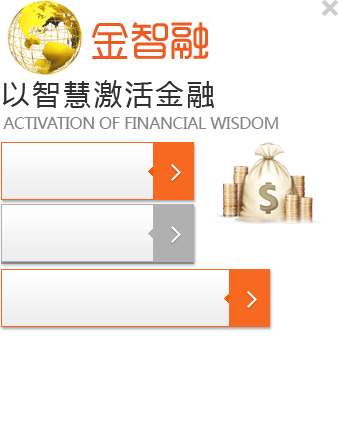
<style>
.page{position:relative;width:339px;height:448px;background:#ffffff}
.page>*{position:absolute;margin:0}
.t1{font:28px "MicrosoftYaHei";letter-spacing:0.1em;color:#302f2f}
.t2{font:16px "MicrosoftYaHei";letter-spacing:-0.025em;color:#858485;text-transform:uppercase}
</style>
<div class="page">
<p class="t1" style="left:2px;top:80px;width:213px;height:28px">以智慧激活金融</p>
<p class="t2" style="left:3px;top:117px;width:275px;height:12px">Activation of financial wisdom</p>
</div>
